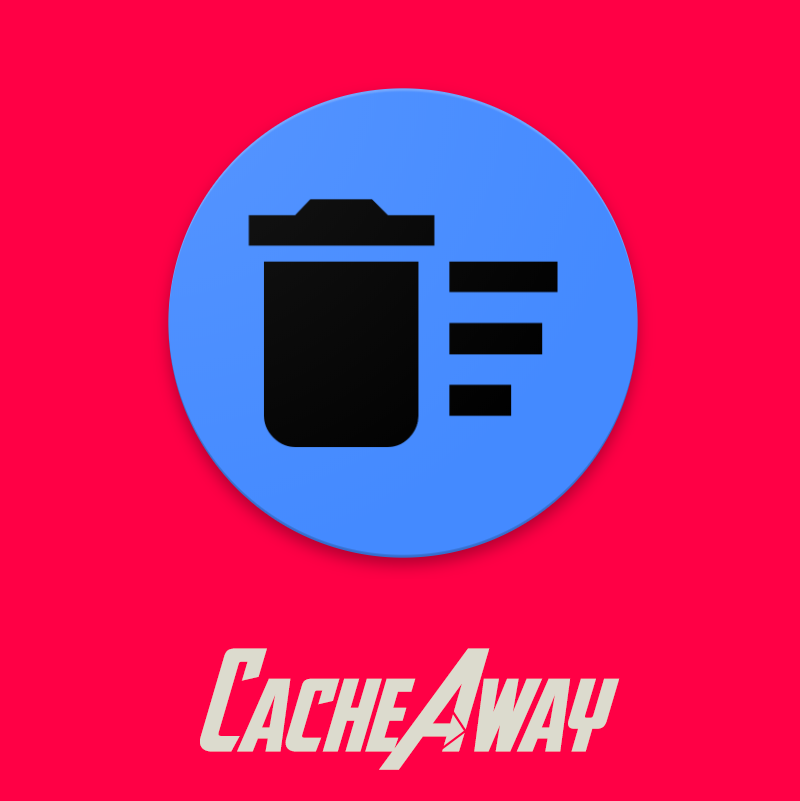
<style>
.page{position:relative;width:800px;height:801px;background:#ff0045}
.page>*{position:absolute;margin:0}
.t1{font:100px "AvengeanceHeroicAvengerNormal";color:#dcdbce}
</style>
<div class="page">
<p class="t1" style="left:200px;top:648px;width:420px;height:122px">CacheAway</p>
</div>
